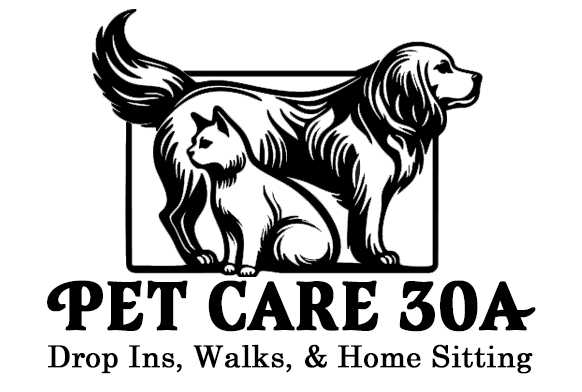
<style>
.page{position:relative;width:582px;height:392px;background:#ffffff}
.page>*{position:absolute;margin:0}
.t1{font:89.3px "CapellinaBoldCaps";color:#000000;font-weight:bold}
.t2{font:30px "CenturySchoolbook";color:#000000;font-weight:bold}
</style>
<div class="page">
<p class="t1" style="left:47px;top:280px;width:489px;height:52px">PET CARE 30A</p>
<p class="t2" style="left:48px;top:344px;width:485px;height:30px">Drop Ins, Walks, &amp; Home Sitting</p>
</div>
